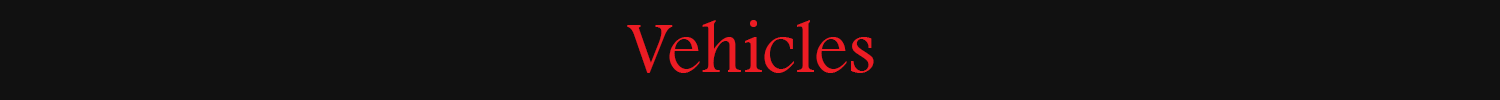
<style>
.page{position:relative;width:1500px;height:100px;background:#111111}
.page>*{position:absolute;margin:0}
.t1{font:75px "FootlightMTLight";color:#ed1c24}
</style>
<div class="page">
<p class="t1" style="left:627px;top:20px;width:247px;height:53px">Vehicles</p>
</div>
